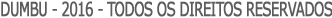
<style>
.page{position:relative;width:332px;height:18px;background:#ffffff}
.page>*{position:absolute;margin:0}
.t1{font:19.6px "Verdana";letter-spacing:-0.05em;color:#5c5c5c;font-weight:bold;scale:0.66 1}
</style>
<div class="page">
<p class="t1" style="left:1px;top:1px;width:332px;height:16px">DUMBU - 2016 - TODOS OS DIREITOS RESERVADOS</p>
</div>
